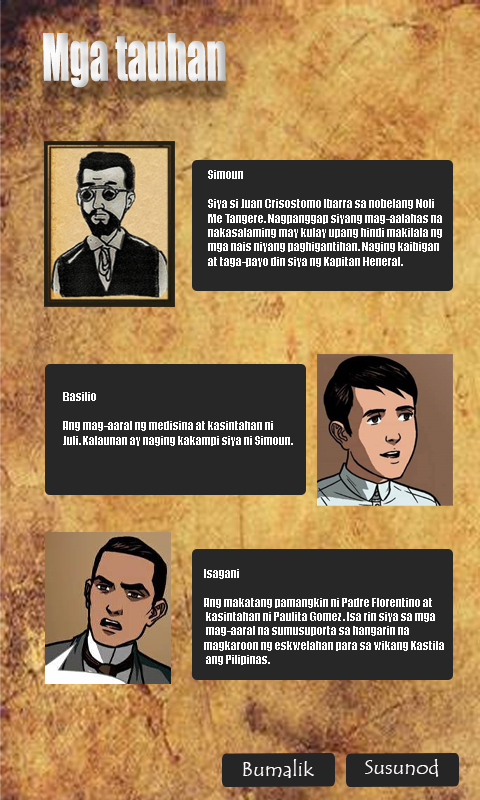
<style>
.page{position:relative;width:480px;height:800px;background:#272727}
.page>*{position:absolute;margin:0}
.t1{font:60px "Impact";color:#ffffff;scale:0.64 1}
.t2{font:12px "Impact";color:#ffffff}
.t3{font:20px "TempusSansITC";color:#fef8f8;scale:1.06 1}
</style>
<div class="page">
<p class="t1" style="left:43px;top:33px;width:183px;height:55px">Mga tauhan</p>
<p class="t2" style="left:208px;top:170px;width:234px;height:97px">Simoun<br><br>Siya si Juan Crisostomo Ibarra sa nobelang Noli Me Tangere. Nagpanggap siyang mag-aalahas na nakasalaming may kulay upang hindi makilala ng mga nais niyang paghigantihan. Naging kaibigan at taga-payo din siya ng Kapitan Heneral.</p>
<p class="t2" style="left:63px;top:392px;width:230px;height:54px">Basilio<br><br>Ang mag-aaral ng medisina at kasintahan ni <br>Juli. Kalaunan ay naging kakampi siya ni Simoun.</p>
<p class="t2" style="left:204px;top:569px;width:240px;height:96px">Isagani<br><br>Ang makatang pamangkin ni Padre Florentino at<br> kasintahan ni Paulita Gomez. Isa rin siya sa mga<br> mag-aaral na sumusuporta sa hangarin na <br>magkaroon ng eskwelahan para sa wikang Kastila<br> ang Pilipinas.</p>
<p class="t3" style="left:243px;top:759px;width:71px;height:19px">Bumalik</p>
<p class="t3" style="left:365px;top:759px;width:74px;height:18px">Susunod</p>
</div>
